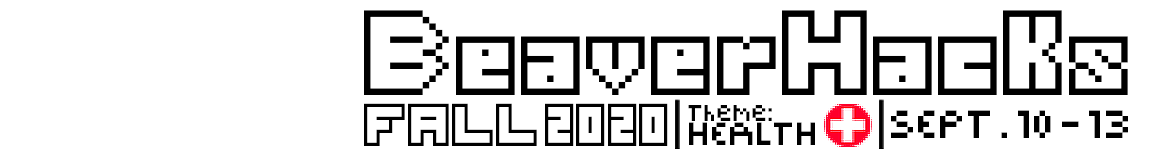
<style>
.page{position:relative;width:1170px;height:156px;background:#ffffff}
.page>*{position:absolute;margin:0}
.t1{font:104.2px "Thirteen-Pixel-Fonts";color:#000000}
.t2{font:51.9px "Thirteen-Pixel-Fonts";color:#000000;scale:0.96 1}
.t3{font:25.6px "Pixel-Block-BB";color:#000000}
.t4{font:44.1px "Pixel-Block-BB";color:#000000}
.t5{font:35.8px "Pixel-Block-BB";color:#000000}
</style>
<div class="page">
<p class="t1" style="left:364px;top:10px;width:764px;height:85px">BeaverHacks</p>
<p class="t2" style="left:364px;top:103px;width:173px;height:43px">FALL</p>
<p class="t2" style="left:545px;top:103px;width:123px;height:43px">2020</p>
<p class="t3" style="left:688px;top:105px;width:84px;height:16px">Theme:</p>
<p class="t4" style="left:891px;top:110px;width:237px;height:28px">SEPT. 10 - 13</p>
<p class="t5" style="left:689px;top:122px;width:126px;height:23px">HEALTH</p>
</div>
